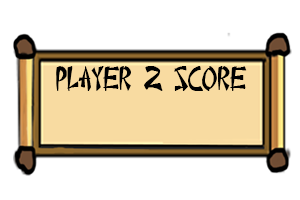
<style>
.page{position:relative;width:300px;height:200px;background:#ffffff}
.page>*{position:absolute;margin:0}
.t1{font:25px "ChineseTakeaway";color:#000000}
</style>
<div class="page">
<p class="t1" style="left:56px;top:66px;width:191px;height:25px">player 2 Score</p>
</div>
